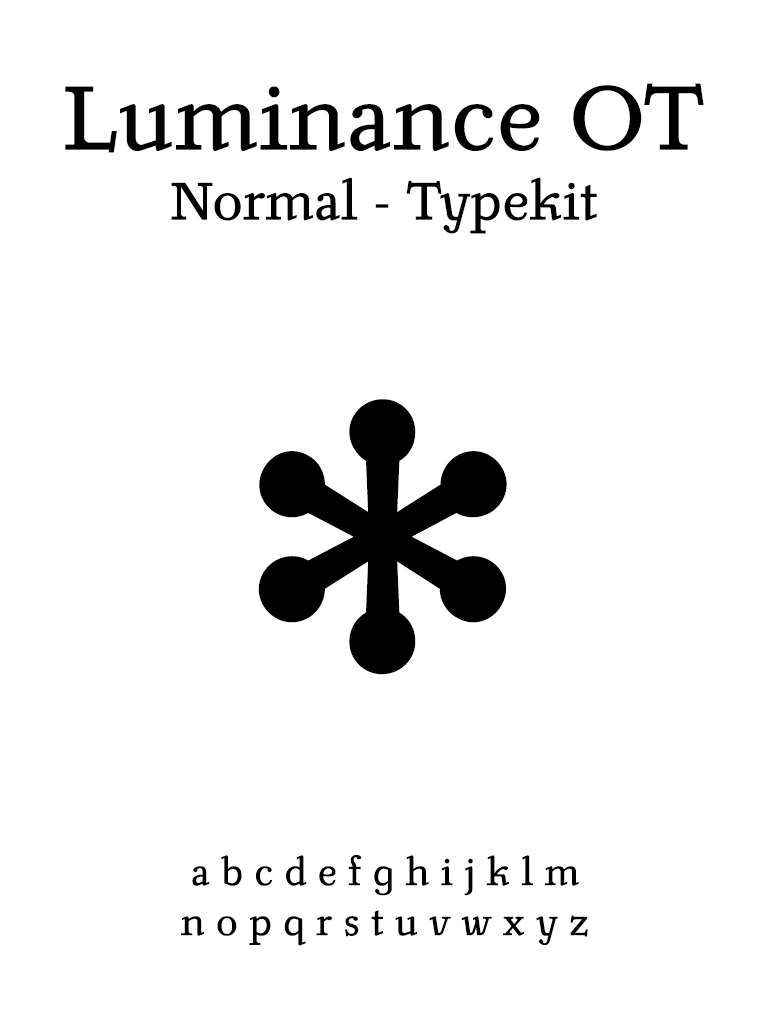
<style>
.page{position:relative;width:768px;height:1024px;background:#ffffff}
.page>*{position:absolute;margin:0}
.t1{font:58.3px "LuminanceOT-Normal";color:#000000}
.t2{font:100px "LuminanceOT-Normal";color:#000000}
.t3{font:723.2px "LuminanceOT-Normal";color:#000000}
.t4{font:41.7px "LuminanceOT-Normal";color:#000000}
</style>
<div class="page">
<p class="t1" style="left:65px;top:83px;width:639px;height:151px;text-align:center"><span class="t2">Luminance OT<br></span>Normal - Typekit</p>
<p class="t3" style="left:258px;top:399px;width:249px;height:276px">*</p>
<p class="t4" style="left:181px;top:855px;width:407px;height:91px;text-align:center">a b c d e f g h i j k l m<br>n o p q r s t u v w x y z</p>
</div>
